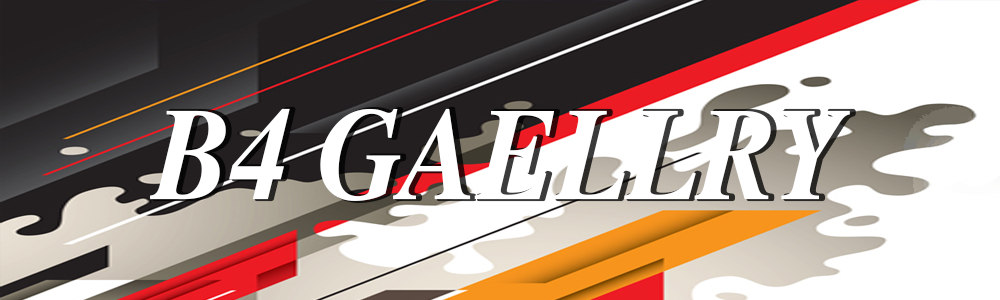
<style>
.page{position:relative;width:1000px;height:300px;background:#ffffff}
.page>*{position:absolute;margin:0}
.t1{font:131.7px "STIXGeneral-BoldItalic";color:#ffffff;scale:0.88 1}
</style>
<div class="page">
<p class="t1" style="left:150px;top:108px;width:700px;height:93px">B4 GAELLRY</p>
</div>
